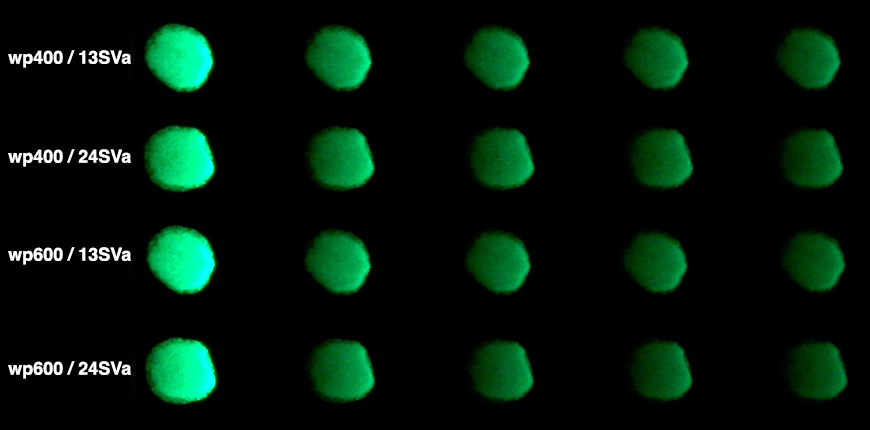
<style>
.page{position:relative;width:870px;height:430px;background:#000000}
.page>*{position:absolute;margin:0}
.t1{font:18px "Helvetica-Bold";color:#ffffff}
</style>
<div class="page">
<p class="t1" style="left:8px;top:50px;width:123px;height:18px">wp400 / 13SVa</p>
<p class="t1" style="left:8px;top:149px;width:123px;height:18px">wp400 / 24SVa</p>
<p class="t1" style="left:8px;top:247px;width:123px;height:18px">wp600 / 13SVa</p>
<p class="t1" style="left:8px;top:361px;width:123px;height:18px">wp600 / 24SVa</p>
</div>
